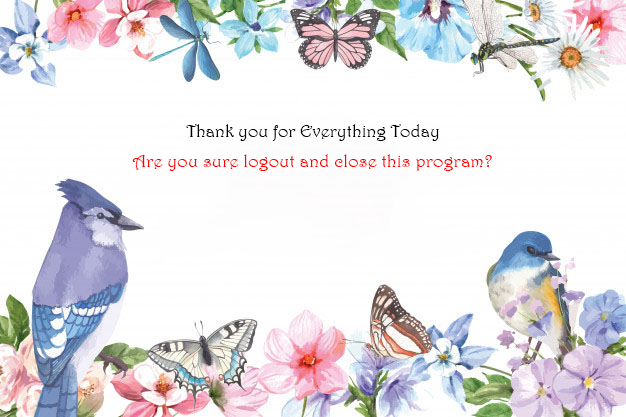
<style>
.page{position:relative;width:626px;height:417px;background:#ffffff}
.page>*{position:absolute;margin:0}
.t1{font:18px "Harrington";color:#000000}
.t2{font:18.4px "Harrington";color:#ff0000}
</style>
<div class="page">
<p class="t1" style="left:186px;top:124px;width:253px;height:17px">Thank you for Everything Today</p>
<p class="t2" style="left:132px;top:154px;width:360px;height:17px">Are you sure logout and close this program?</p>
</div>
